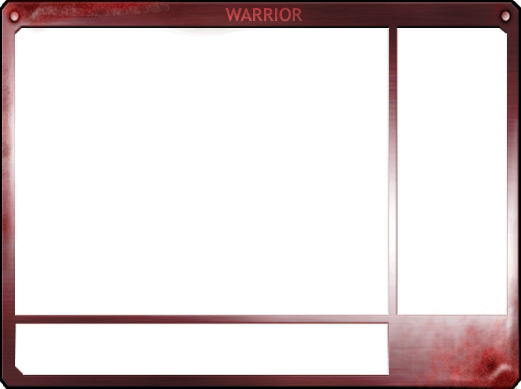
<style>
.page{position:relative;width:521px;height:389px;background:#ffffff}
.page>*{position:absolute;margin:0}
.t1{font:18px "TrebuchetMS-Bold";color:#ad4143}
</style>
<div class="page">
<p class="t1" style="left:225px;top:7px;width:78px;height:15px">WARRIOR</p>
</div>
